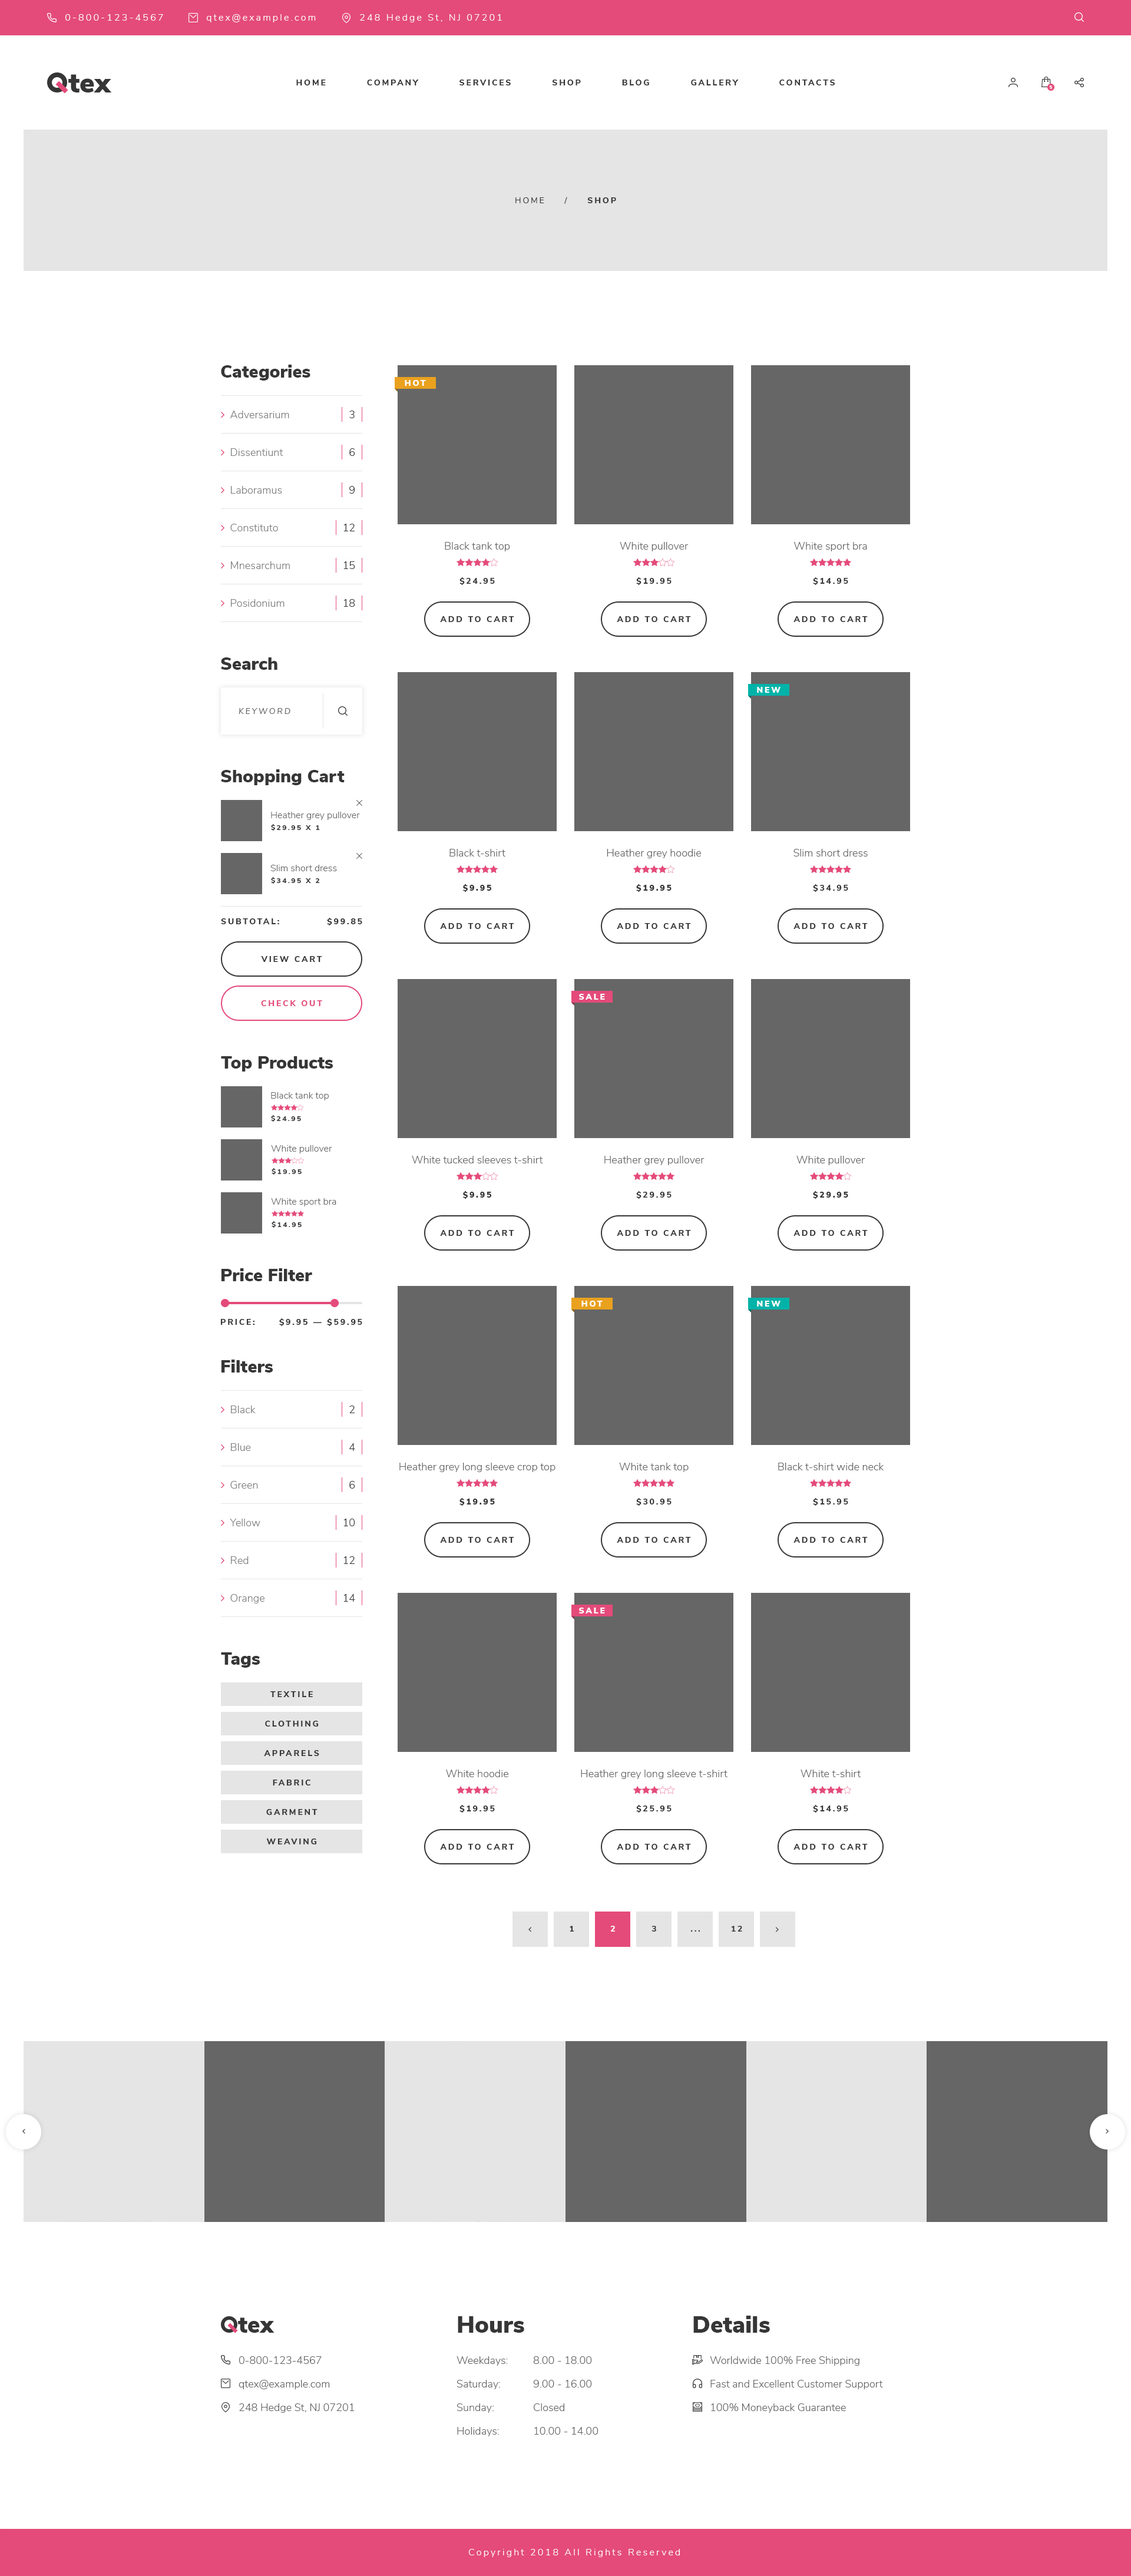
<style>
.page{position:relative;width:1131px;height:2576px;background:#ffffff}
.page>*{position:absolute;margin:0}
.t1{font:9.4px "NunitoSans-Light";letter-spacing:0.2em;color:#ffffff}
.t2{font:8.2px "NunitoSans-ExtraBold";letter-spacing:0.2em;color:#363636;text-transform:uppercase}
.t3{font:4.7px "NunitoSans-Black";color:#ffffff;text-transform:uppercase}
.t4{font:8.2px "NunitoSans-Regular";letter-spacing:0.2em;color:#363636;text-transform:uppercase}
.t5{font:17.7px "NunitoSans-Black";color:#363636}
.t6{font:8.2px "NunitoSans-Black";letter-spacing:0.2em;color:#ffffff;text-transform:uppercase}
.t7{font:10.6px/37.7px "NunitoSans-Light";color:#363636}
.t8{font:10.6px "NunitoSans-Light";color:#666666}
.t9{font:8.2px "NunitoSans-Italic";letter-spacing:0.2em;color:#666666;text-transform:uppercase}
.t10{font:9.4px "NunitoSans-Light";color:#666666}
.t11{font:7.1px "NunitoSans-ExtraBold";letter-spacing:0.2em;color:#363636;text-transform:uppercase}
.t12{font:8.2px "NunitoSans-Black";letter-spacing:0.2em;color:#363636;text-transform:uppercase}
.t13{font:8.2px "NunitoSans-ExtraBold";letter-spacing:0.2em;color:#e44a7a;text-transform:uppercase}
.t14{font:8.2px "NunitoSans-ExtraBold";letter-spacing:0.2em;color:#363636}
.t15{font:8.2px "NunitoSans-ExtraBold";letter-spacing:0.2em;color:#ffffff}
.t16{font:23.6px "NunitoSans-Black";color:#363636}
.t17{font:10.6px/23.6px "NunitoSans-Light";color:#666666}
</style>
<div class="page">
<p class="t1" style="left:65px;top:14px;width:98px;height:7px">0-800-123-4567</p>
<p class="t1" style="left:206px;top:14px;width:110px;height:8px">qtex@example.com</p>
<p class="t1" style="left:360px;top:14px;width:142px;height:8px">248 Hedge St, NJ 07201</p>
<p class="t2" style="left:296px;top:80px;width:539px;height:5px">Home          Company          Services          Shop          Blog          Gallery          Contacts</p>
<p class="t3" style="left:1049px;top:85px;width:4px;height:4px">5</p>
<p class="t4" style="left:515px;top:197px;width:101px;height:7px">Home     /     <span class="t2">Shop</span></p>
<p class="t5" style="left:221px;top:365px;width:89px;height:16px">Categories</p>
<p class="t6" style="left:405px;top:380px;width:21px;height:6px">Hot</p>
<p class="t7" style="left:343px;top:411px;width:12px;height:196px;text-align:right">3<br>6<br>9<br>12<br>15<br>18</p>
<p class="t8" style="left:445px;top:542px;width:65px;height:9px">Black tank top</p>
<p class="t8" style="left:620px;top:542px;width:69px;height:9px">White pullover</p>
<p class="t8" style="left:793px;top:542px;width:74px;height:9px">White sport bra</p>
<p class="t2" style="left:459px;top:577px;width:36px;height:8px">$24.95</p>
<p class="t2" style="left:636px;top:577px;width:36px;height:8px">$19.95</p>
<p class="t2" style="left:813px;top:577px;width:35px;height:8px">$14.95</p>
<p class="t2" style="left:440px;top:616px;width:74px;height:6px">add To Cart</p>
<p class="t2" style="left:617px;top:616px;width:74px;height:6px">add To Cart</p>
<p class="t2" style="left:793px;top:616px;width:75px;height:6px">add To Cart</p>
<p class="t5" style="left:221px;top:657px;width:56px;height:13px">Search</p>
<p class="t6" style="left:757px;top:687px;width:24px;height:6px">New</p>
<p class="t9" style="left:239px;top:708px;width:51px;height:6px">keyword</p>
<p class="t5" style="left:221px;top:769px;width:124px;height:16px">Shopping Cart</p>
<p class="t10" style="left:271px;top:812px;width:89px;height:8px">Heather grey pullover</p>
<p class="t11" style="left:271px;top:824px;width:49px;height:7px">$29.95 x 1</p>
<p class="t8" style="left:449px;top:849px;width:56px;height:8px">Black t-shirt</p>
<p class="t8" style="left:607px;top:849px;width:94px;height:9px">Heather grey hoodie</p>
<p class="t8" style="left:793px;top:849px;width:75px;height:8px">Slim short dress</p>
<p class="t10" style="left:270px;top:865px;width:67px;height:6px">Slim short dress</p>
<p class="t11" style="left:271px;top:877px;width:49px;height:7px">$34.95 x 2</p>
<p class="t12" style="left:463px;top:884px;width:28px;height:8px">$9.95</p>
<p class="t12" style="left:636px;top:884px;width:36px;height:8px">$19.95</p>
<p class="t2" style="left:813px;top:884px;width:35px;height:8px">$34.95</p>
<p class="t2" style="left:327px;top:918px;width:35px;height:7px">$99.85</p>
<p class="t2" style="left:221px;top:918px;width:58px;height:6px">Subtotal:</p>
<p class="t2" style="left:440px;top:923px;width:74px;height:6px">add To Cart</p>
<p class="t2" style="left:617px;top:923px;width:74px;height:6px">add To Cart</p>
<p class="t2" style="left:793px;top:923px;width:75px;height:6px">add To Cart</p>
<p class="t2" style="left:261px;top:956px;width:61px;height:6px">view Cart</p>
<p class="t13" style="left:261px;top:1000px;width:61px;height:6px">Check Out</p>
<p class="t6" style="left:579px;top:994px;width:26px;height:6px">Sale</p>
<p class="t5" style="left:221px;top:1056px;width:112px;height:16px">Top Products</p>
<p class="t10" style="left:271px;top:1092px;width:58px;height:8px">Black tank top</p>
<p class="t11" style="left:271px;top:1115px;width:30px;height:7px">$24.95</p>
<p class="t10" style="left:271px;top:1145px;width:61px;height:8px">White pullover</p>
<p class="t8" style="left:412px;top:1156px;width:131px;height:7px">White tucked sleeves t-shirt</p>
<p class="t8" style="left:604px;top:1156px;width:101px;height:9px">Heather grey pullover</p>
<p class="t8" style="left:796px;top:1156px;width:69px;height:9px">White pullover</p>
<p class="t11" style="left:272px;top:1168px;width:30px;height:7px">$19.95</p>
<p class="t12" style="left:463px;top:1191px;width:28px;height:8px">$9.95</p>
<p class="t2" style="left:636px;top:1191px;width:36px;height:8px">$29.95</p>
<p class="t12" style="left:813px;top:1191px;width:35px;height:8px">$29.95</p>
<p class="t10" style="left:271px;top:1198px;width:65px;height:8px">White sport bra</p>
<p class="t11" style="left:272px;top:1221px;width:30px;height:7px">$14.95</p>
<p class="t2" style="left:440px;top:1230px;width:74px;height:6px">add To Cart</p>
<p class="t2" style="left:617px;top:1230px;width:74px;height:6px">add To Cart</p>
<p class="t2" style="left:793px;top:1230px;width:75px;height:6px">add To Cart</p>
<p class="t5" style="left:221px;top:1268px;width:91px;height:13px">Price Filter</p>
<p class="t6" style="left:581px;top:1301px;width:22px;height:6px">Hot</p>
<p class="t6" style="left:757px;top:1301px;width:24px;height:6px">New</p>
<p class="t2" style="left:220px;top:1319px;width:35px;height:6px">Price:</p>
<p class="t14" style="left:279px;top:1318px;width:83px;height:8px">$9.95 <span class="t2">— </span>$59.95</p>
<p class="t5" style="left:221px;top:1360px;width:52px;height:13px">Filters</p>
<p class="t7" style="left:343px;top:1406px;width:12px;height:196px;text-align:right">2<br>4<br>6<br>10<br>12<br>14</p>
<p class="t8" style="left:399px;top:1463px;width:156px;height:9px">Heather grey long sleeve crop top</p>
<p class="t8" style="left:619px;top:1463px;width:70px;height:9px">White tank top</p>
<p class="t8" style="left:778px;top:1463px;width:106px;height:7px">Black t-shirt wide neck</p>
<p class="t12" style="left:459px;top:1498px;width:36px;height:8px">$19.95</p>
<p class="t2" style="left:636px;top:1498px;width:36px;height:8px">$30.95</p>
<p class="t2" style="left:813px;top:1498px;width:35px;height:8px">$15.95</p>
<p class="t2" style="left:440px;top:1537px;width:74px;height:6px">add To Cart</p>
<p class="t2" style="left:617px;top:1537px;width:74px;height:6px">add To Cart</p>
<p class="t2" style="left:793px;top:1537px;width:75px;height:6px">add To Cart</p>
<p class="t6" style="left:579px;top:1608px;width:26px;height:5px">Sale</p>
<p class="t5" style="left:221px;top:1652px;width:39px;height:16px">Tags</p>
<p class="t2" style="left:270px;top:1691px;width:43px;height:6px">textile</p>
<p class="t2" style="left:265px;top:1721px;width:54px;height:6px">clothing</p>
<p class="t2" style="left:264px;top:1750px;width:55px;height:6px">apparels</p>
<p class="t8" style="left:446px;top:1770px;width:62px;height:7px">White hoodie</p>
<p class="t8" style="left:581px;top:1770px;width:147px;height:9px">Heather grey long sleeve t-shirt</p>
<p class="t8" style="left:801px;top:1770px;width:60px;height:7px">White t-shirt</p>
<p class="t2" style="left:273px;top:1780px;width:37px;height:5px">fabric</p>
<p class="t2" style="left:459px;top:1805px;width:36px;height:8px">$19.95</p>
<p class="t2" style="left:636px;top:1805px;width:36px;height:8px">$25.95</p>
<p class="t2" style="left:813px;top:1805px;width:35px;height:8px">$14.95</p>
<p class="t2" style="left:266px;top:1809px;width:52px;height:6px">garment</p>
<p class="t2" style="left:266px;top:1838px;width:51px;height:6px">weaving</p>
<p class="t2" style="left:440px;top:1844px;width:74px;height:6px">add To Cart</p>
<p class="t2" style="left:617px;top:1844px;width:74px;height:6px">add To Cart</p>
<p class="t2" style="left:793px;top:1844px;width:75px;height:6px">add To Cart</p>
<p class="t14" style="left:570px;top:1926px;width:4px;height:6px">1</p>
<p class="t15" style="left:610px;top:1926px;width:5px;height:6px">2</p>
<p class="t14" style="left:652px;top:1926px;width:4px;height:6px">3</p>
<p class="t14" style="left:731px;top:1926px;width:11px;height:6px">125</p>
<p class="t14" style="left:691px;top:1930px;width:9px;height:2px">...</p>
<p class="t16" style="left:458px;top:2316px;width:66px;height:17px">Hours</p>
<p class="t16" style="left:693px;top:2316px;width:77px;height:17px">Details</p>
<p class="t17" style="left:239px;top:2356px;width:116px;height:57px">0-800-123-4567<br>qtex@example.com<br>248 Hedge St, NJ 07201</p>
<p class="t17" style="left:457px;top:2356px;width:51px;height:80px">Weekdays:<br>Saturday:<br>Sunday:<br>Holidays:</p>
<p class="t17" style="left:533px;top:2356px;width:65px;height:79px">8.00 - 18.00<br>9.00 - 16.00<br>Closed<br>10.00 - 14.00</p>
<p class="t17" style="left:710px;top:2356px;width:173px;height:57px">Worldwide 100% Free Shipping<br>Fast and Excellent Customer Support<br>100% Moneyback Guarantee</p>
<p class="t1" style="left:468px;top:2549px;width:212px;height:8px">Copyright 2018 All Rights Reserved</p>
</div>
